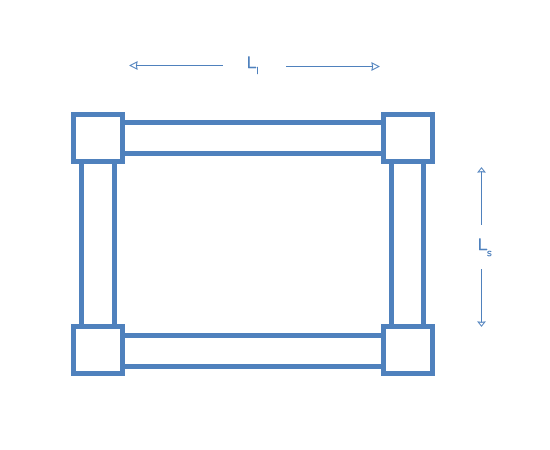
<style>
.page{position:relative;width:550px;height:450px;background:#ffffff}
.page>*{position:absolute;margin:0}
.t1{font:16.3px "MontserratRoman-Regular";color:#4f81bd}
</style>
<div class="page">
<p class="t1" style="left:248px;top:56px;width:10px;height:19px">Ll</p>
<p class="t1" style="left:479px;top:238px;width:13px;height:19px">Ls</p>
</div>
